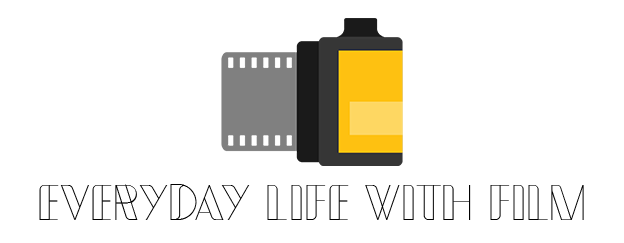
<style>
.page{position:relative;width:624px;height:243px;background:#ffffff}
.page>*{position:absolute;margin:0}
.t1{font:50px "Typometry_Regular";color:#000000}
</style>
<div class="page">
<p class="t1" style="left:39px;top:184px;width:545px;height:36px">everyday life with film</p>
</div>
